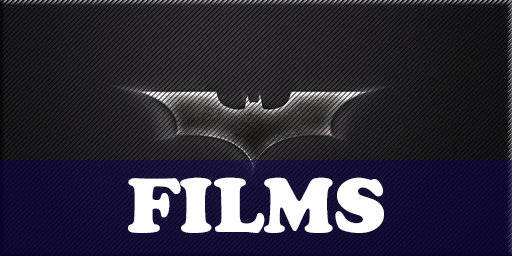
<style>
.page{position:relative;width:512px;height:256px}
.page>*{position:absolute;margin:0}
.t1{font:80px "CooperBlack";color:#ffffff}
</style>
<div class="page">
<p class="t1" style="left:128px;top:177px;width:256px;height:56px">FILMS</p>
</div>
